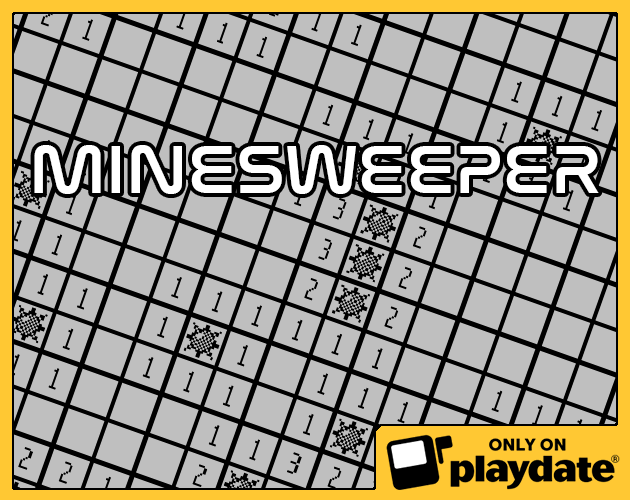
<style>
.page{position:relative;width:630px;height:500px;background:#bfbfbf}
.page>*{position:absolute;margin:0}
.t1{font:70px "NasalizationRg-Regular";color:#ffffff}
</style>
<div class="page">
<p class="t1" style="left:34px;top:145px;width:565px;height:49px">MINESWEEPER</p>
</div>
